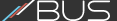
<style>
.page{position:relative;width:117px;height:21px;background:#333333}
.page>*{position:absolute;margin:0}
.t1{font:25.5px "Punavuori00150";letter-spacing:0.075em;color:#ffffff;scale:0.96 1}
</style>
<div class="page">
<p class="t1" style="left:37px;top:0px;width:73px;height:21px">BUS</p>
</div>
